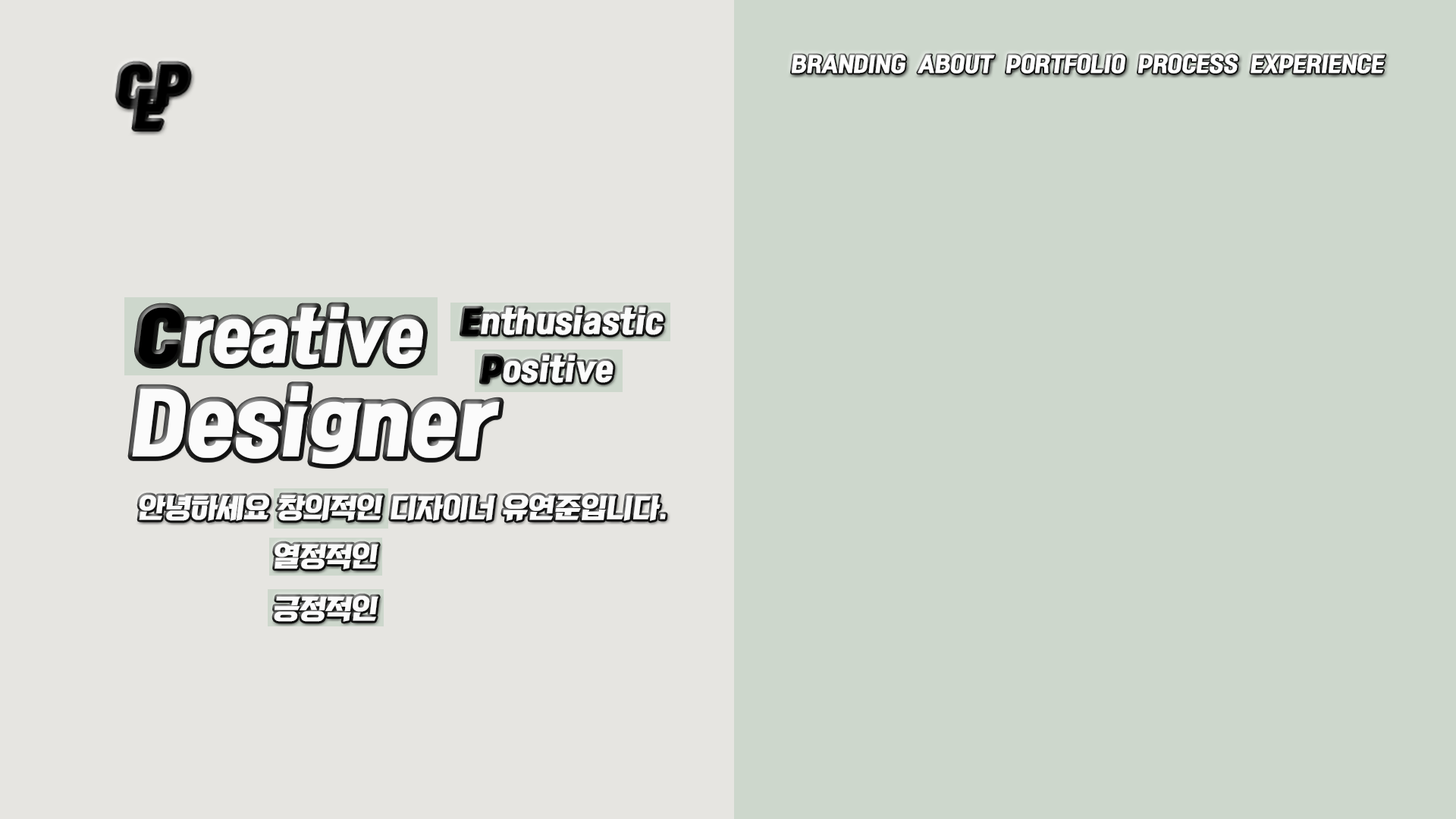
<style>
.page{position:relative;width:1456px;height:819px;background:#cdd7cc}
.page>*{position:absolute;margin:0}
.t1{font:21.1px "KoreanRKT-R";color:#ffffff}
.t2{font:63.5px "KoreanRKT-R";color:#fbfbfb}
.t3{font:63.5px "KoreanRKT-R";color:#000000}
.t4{font:30.3px "KoreanRKT-R";color:#fbfbfb}
.t5{font:30.3px "KoreanRKT-R";color:#000000}
.t6{font:79.6px "KoreanRKT-R";color:#fbfbfb}
.t7{font:26.5px "KoreanRKT-R";color:#fbfbfb}
</style>
<div class="page">
<p class="t1" style="left:792px;top:54px;width:593px;height:20px">BRANDING  ABOUT  PORTFOLIO  PROCESS  EXPERIENCE</p>
<p class="t2" style="left:139px;top:306px;width:284px;height:59px"><span class="t3">C</span>reative</p>
<p class="t4" style="left:461px;top:307px;width:203px;height:28px"><span class="t5">E</span>nthusiastic</p>
<p class="t4" style="left:481px;top:355px;width:132px;height:28px"><span class="t5">P</span>ositive</p>
<p class="t6" style="left:132px;top:386px;width:368px;height:78px">Designer</p>
<p class="t7" style="left:139px;top:494px;width:527px;height:27px">안녕하세요 창의적인 디자이너 유연준입니다.</p>
<p class="t7" style="left:275px;top:543px;width:103px;height:27px">열정적인</p>
<p class="t7" style="left:274px;top:595px;width:104px;height:27px">긍정적인</p>
</div>
